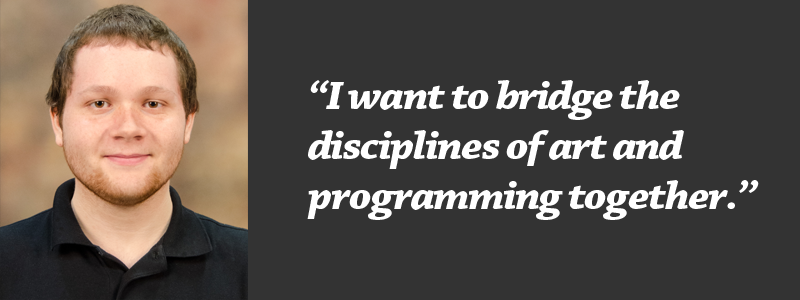
<style>
.page{position:relative;width:800px;height:300px;background:#333333}
.page>*{position:absolute;margin:0}
.t1{font:41.7px "ChaparralPro-BoldIt";letter-spacing:-0.035em;color:#ffffff;scale:1.08 1}
</style>
<div class="page">
<p class="t1" style="left:307px;top:80px;width:452px;height:140px">“I want to bridge the <br>disciplines of art and <br>programming together.”</p>
</div>
